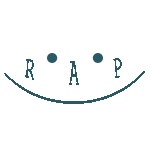
<style>
.page{position:relative;width:150px;height:150px;background:#ffffff}
.page>*{position:absolute;margin:0}
.t1{font:15.3px "CourierNewPSMT";letter-spacing:0.1em;color:#285965;text-decoration:underline}
</style>
<div class="page">
<p class="t1" style="left:4px;top:58px;width:141px;height:46px;rotate:-1deg">R   A   P</p>
</div>
